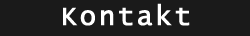
<style>
.page{position:relative;width:250px;height:36px;background:#1a1a1a}
.page>*{position:absolute;margin:0}
.t1{font:26.7px "LucidaConsole";letter-spacing:0.075em;color:#ffffff;font-weight:bold}
</style>
<div class="page">
<p class="t1" style="left:63px;top:3px;width:127px;height:23px">Kontakt</p>
</div>
